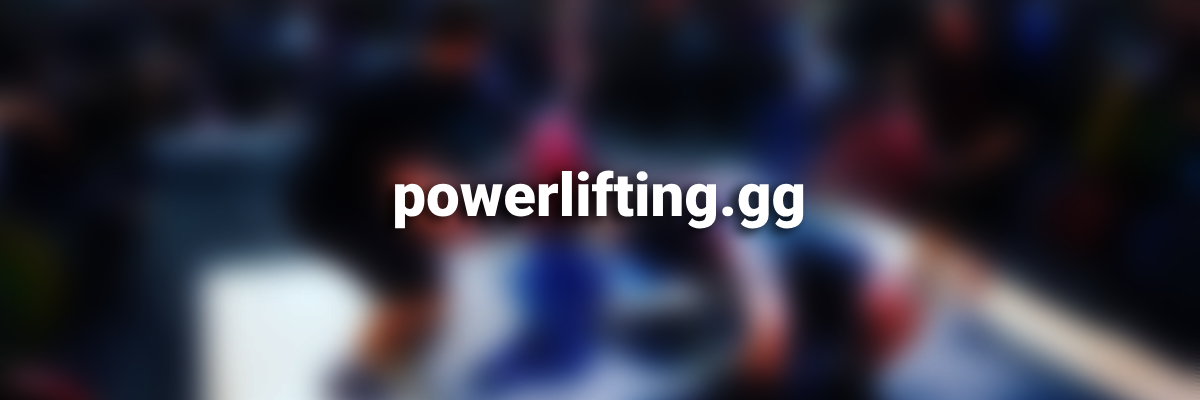
<style>
.page{position:relative;width:1200px;height:400px}
.page>*{position:absolute;margin:0}
.t1{font:60px "Roboto-Black";color:#ffffff}
</style>
<div class="page">
<p class="t1" style="left:395px;top:170px;width:409px;height:59px">powerlifting.gg</p>
</div>
